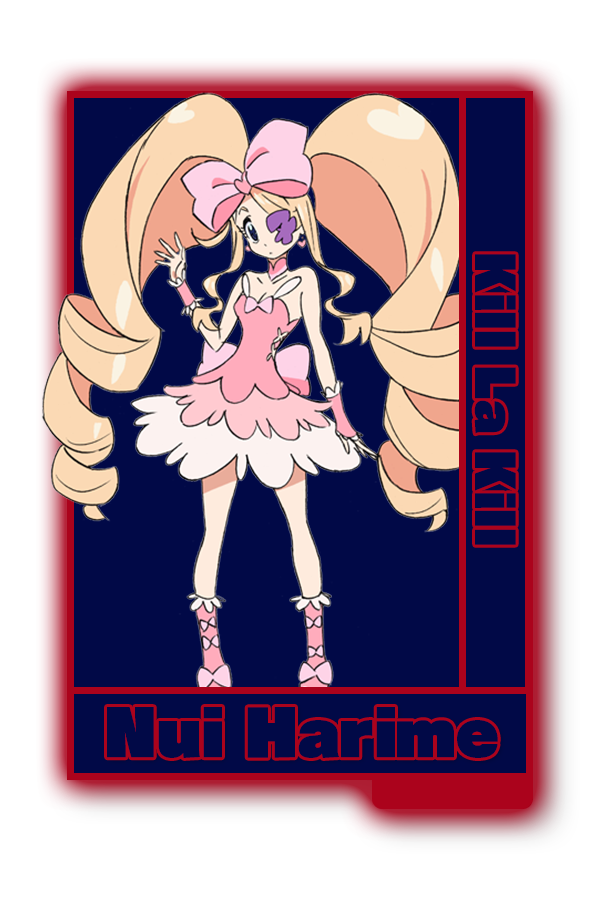
<style>
.page{position:relative;width:600px;height:900px;background:#010947}
.page>*{position:absolute;margin:0}
.t1{font:48.8px "RaglanPunchStd-UB";color:#010947}
.t2{font:60.3px "RaglanPunchStd-UB";color:#010947}
</style>
<div class="page">
<p class="t1" style="left:474px;top:254px;width:42px;height:291px;rotate:90deg">Kill La Kill</p>
<p class="t2" style="left:107px;top:707px;width:391px;height:51px">Nui Harime</p>
</div>
